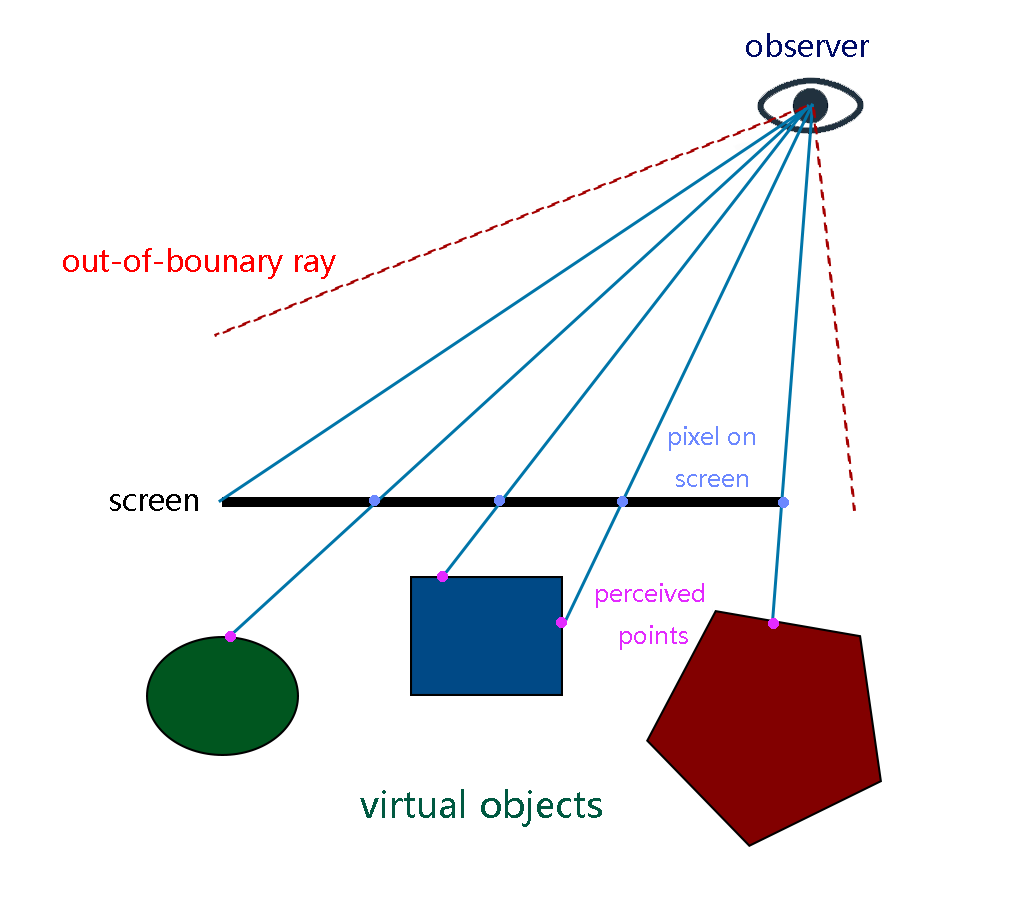
<style>
.page{position:relative;width:1024px;height:903px;background:#ffffff}
.page>*{position:absolute;margin:0}
.t1{font:30px "MicrosoftYaHei";color:#000c67}
.t2{font:30px "MicrosoftYaHei";color:#ff0000}
.t3{font:24px "MicrosoftYaHei";color:#6c88ff}
.t4{font:30px "MicrosoftYaHei";color:#000000}
.t5{font:24px "MicrosoftYaHei";color:#e32aff}
.t6{font:36px "MicrosoftYaHei";color:#005941}
</style>
<div class="page">
<p class="t1" style="left:746px;top:33px;width:123px;height:24px">observer</p>
<p class="t2" style="left:63px;top:248px;width:273px;height:31px">out-of-bounary ray</p>
<p class="t3" style="left:669px;top:426px;width:86px;height:61px;text-align:center">pixel on <br>screen</p>
<p class="t4" style="left:110px;top:494px;width:88px;height:17px">screen</p>
<p class="t5" style="left:596px;top:583px;width:108px;height:67px;text-align:center">perceived<br> points</p>
<p class="t6" style="left:360px;top:789px;width:242px;height:38px">virtual objects</p>
</div>
